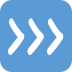
<style>
.page{position:relative;width:72px;height:72px;background:#5b9bd5}
.page>*{position:absolute;margin:0}
.t1{font:78.9px "ComicSansMS";color:#ffffff;font-weight:bold;scale:0.61 1}
</style>
<div class="page">
<p class="t1" style="left:8px;top:18px;width:56px;height:37px">&gt;&gt;&gt;</p>
</div>
